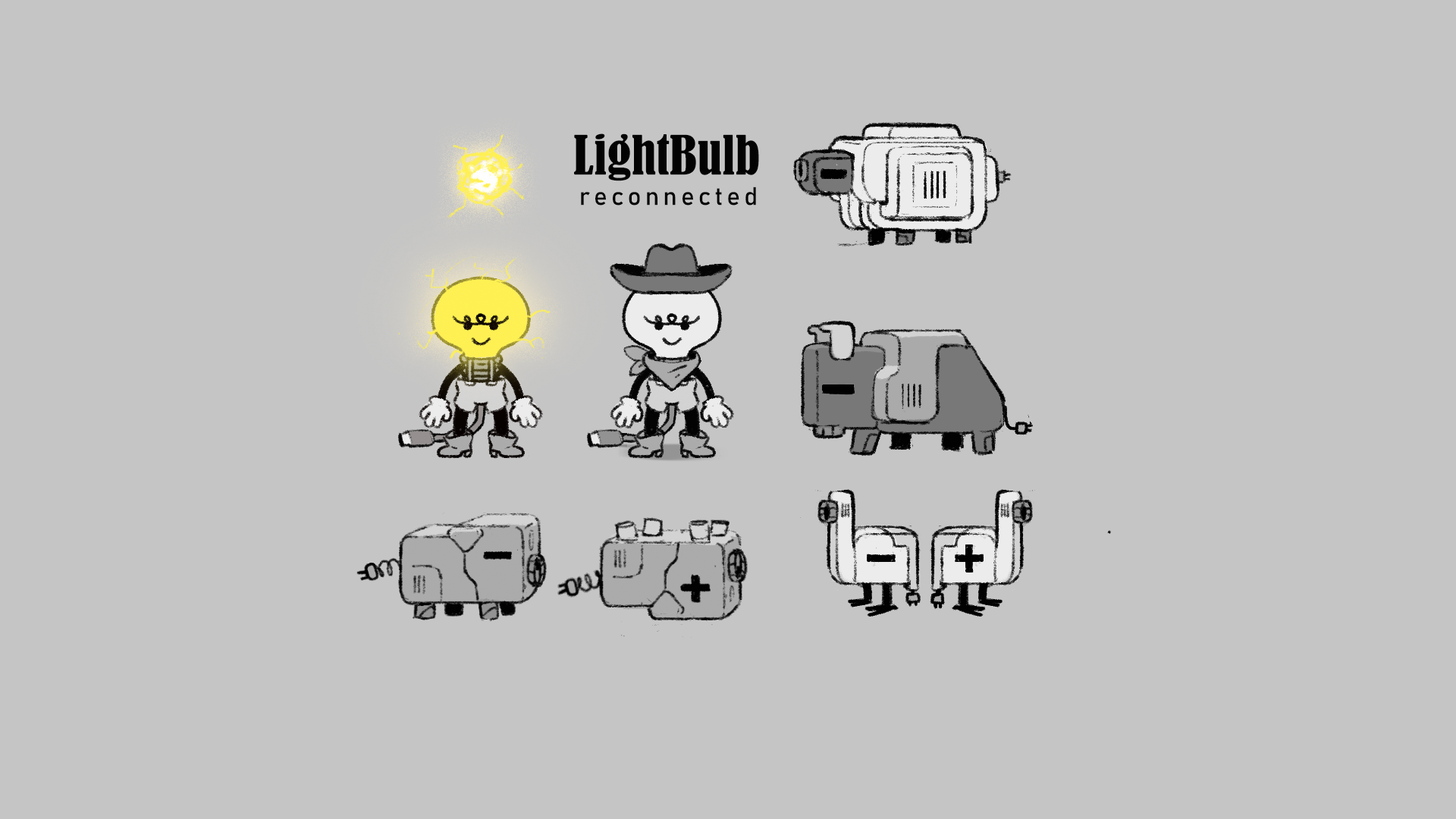
<style>
.page{position:relative;width:1456px;height:819px;background:#c5c5c5}
.page>*{position:absolute;margin:0}
.t1{font:25.3px "Bahnschrift";letter-spacing:0.15em;color:#030303}
.t2{font:50.6px "BernardMT-Condensed";color:#030303}
</style>
<div class="page">
<p class="t1" style="left:574px;top:133px;width:185px;height:73px;text-align:center"><span class="t2">LightBulb<br></span>reconnected</p>
</div>
